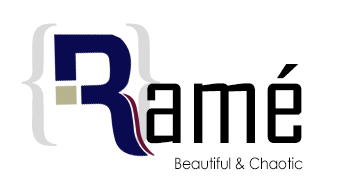
<style>
.page{position:relative;width:339px;height:194px;background:#ffffff}
.page>*{position:absolute;margin:0}
.t1{font:150px "BaskOldFace";color:#dadada}
.t2{font:125px "AgencyFB-Reg";color:#000000}
.t3{font:15.7px "CenturyGothic";letter-spacing:-0.02em;color:#000000;scale:0.91 1}
</style>
<div class="page">
<p class="t1" style="left:21px;top:23px;width:36px;height:123px;rotate:180deg">}</p>
<p class="t2" style="left:146px;top:64px;width:156px;height:80px">amé</p>
<p class="t3" style="left:175px;top:157px;width:128px;height:13px">Beautiful &amp; Chaotic</p>
</div>
